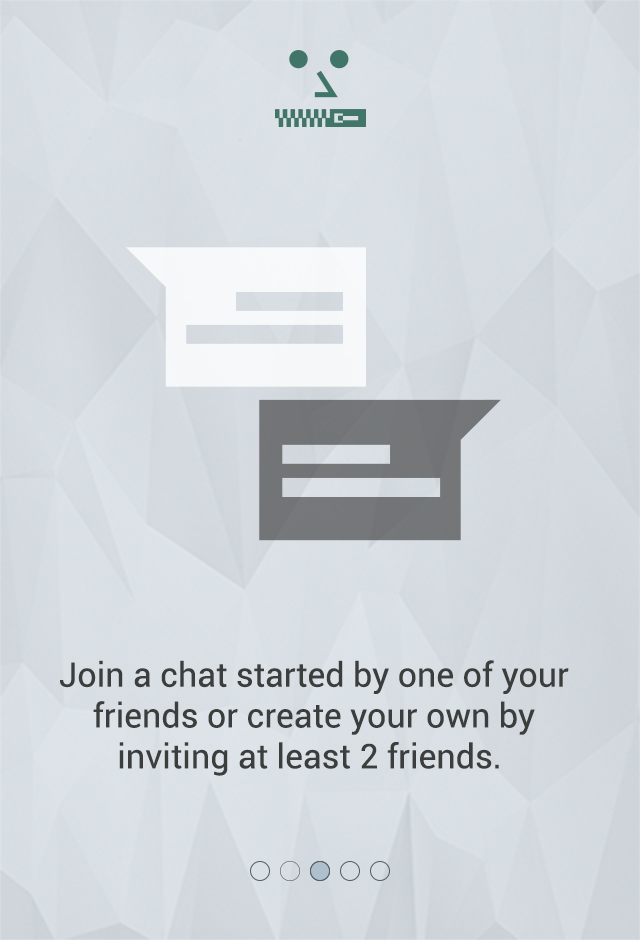
<style>
.page{position:relative;width:640px;height:940px}
.page>*{position:absolute;margin:0}
.t1{font:34px "Roboto-Regular";color:#3b3e3d}
</style>
<div class="page">
<p class="t1" style="left:60px;top:660px;width:509px;height:116px;text-align:center">Join a chat started by one of your<br>friends or create your own by<br>inviting at least 2 friends.</p>
</div>
